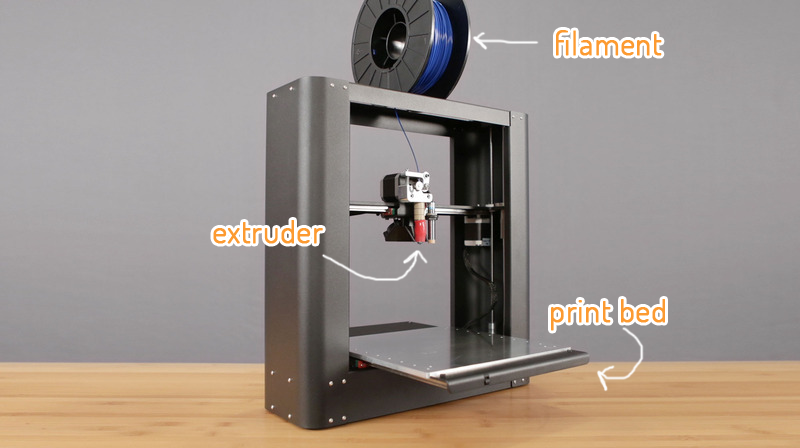
<style>
.page{position:relative;width:800px;height:448px}
.page>*{position:absolute;margin:0}
.t1{font:32.1px "Dosis-Light";letter-spacing:0.01em;color:#fc9a31;font-weight:bold}
</style>
<div class="page">
<p class="t1" style="left:556px;top:30px;width:106px;height:26px">filament</p>
<p class="t1" style="left:213px;top:220px;width:110px;height:24px">extruder</p>
<p class="t1" style="left:551px;top:299px;width:114px;height:32px">print bed</p>
</div>
